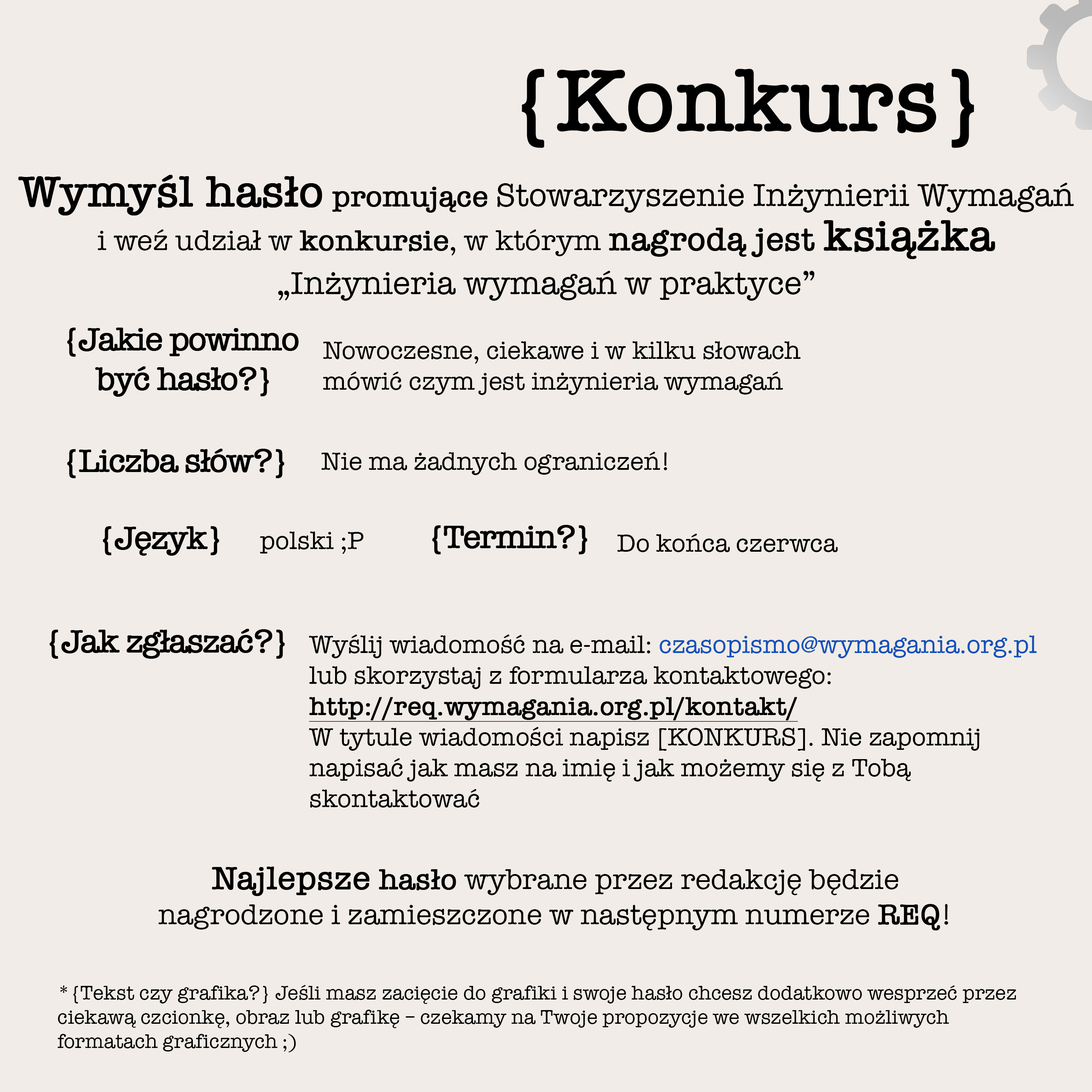
<style>
.page{position:relative;width:1092px;height:1092px;background:#f1ece7}
.page>*{position:absolute;margin:0}
.t1{font:88.1px "AmericanTypewriter";color:#000000;font-weight:bold}
.t2{font:33px/44px "AmericanTypewriter";color:#000000}
.t3{font:44px/44px "AmericanTypewriter";color:#000000;font-weight:bold}
.t4{font:29.4px/44px "AmericanTypewriter";color:#000000;font-weight:bold}
.t5{font:29.4px/44px "AmericanTypewriter";color:#000000}
.t6{font:33px/44px "AmericanTypewriter";color:#000000;font-weight:bold}
.t7{font:33px "AmericanTypewriter";letter-spacing:-0.05em;color:#000000;font-weight:bold}
.t8{font:25.7px "AmericanTypewriter";color:#000000}
.t9{font:25.7px "AmericanTypewriter";color:#1050ba}
.t10{font:25.7px "AmericanTypewriter";color:#000000;font-weight:bold;text-decoration:underline}
.t11{font:29.4px "AmericanTypewriter";color:#000000}
.t12{font:33px "AmericanTypewriter";color:#000000;font-weight:bold}
.t13{font:29.4px "AmericanTypewriter";color:#000000;font-weight:bold}
.t14{font:20.2px "AmericanTypewriter";color:#000000}
</style>
<div class="page">
<p class="t1" style="left:522px;top:69px;width:452px;height:79px">{Konkurs}</p>
<p class="t2" style="left:18px;top:175px;width:1056px;height:126px;text-align:center"><span class="t3">Wymyśl hasło</span><span class="t4"> promujące </span>Stowarzyszenie Inżynierii Wymagań<span class="t5"> i weź udział w </span><span class="t4">konkursie</span><span class="t5">, w którym </span><span class="t6">nagrodą jest </span><span class="t3">książka</span><span class="t5"> <br></span>„Inżynieria wymagań w praktyce”</p>
<p class="t7" style="left:67px;top:328px;width:232px;height:69px;text-align:center">{Jakie powinno <br>być hasło?}</p>
<p class="t8" style="left:323px;top:341px;width:478px;height:54px">Nowoczesne, ciekawe i w kilku słowach mówić czym jest inżynieria wymagań</p>
<p class="t7" style="left:67px;top:449px;width:217px;height:29px">{Liczba słów?}</p>
<p class="t8" style="left:321px;top:452px;width:346px;height:23px">Nie ma żadnych ograniczeń!</p>
<p class="t7" style="left:103px;top:526px;width:116px;height:30px">{Język}</p>
<p class="t8" style="left:260px;top:531px;width:104px;height:23px">polski ;P</p>
<p class="t7" style="left:432px;top:525px;width:155px;height:29px">{Termin?}</p>
<p class="t8" style="left:617px;top:534px;width:221px;height:18px">Do końca czerwca</p>
<p class="t7" style="left:49px;top:629px;width:236px;height:30px">{Jak zgłaszać?}</p>
<p class="t8" style="left:309px;top:634px;width:728px;height:174px">Wyślij wiadomość na e-mail: <span class="t9">czasopismo@wymagania.org.pl </span>lub skorzystaj z formularza kontaktowego: <span class="t10">http://req.wymagania.org.pl/kontakt/<br></span>W tytule wiadomości napisz [KONKURS]. Nie zapomnij napisać jak masz na imię i jak możemy się z Tobą skontaktować</p>
<p class="t11" style="left:159px;top:867px;width:789px;height:63px;text-align:center"><span class="t12">Najlepsze</span><span class="t13"> hasło</span> wybrane przez redakcję będzie nagrodzone i zamieszczone w następnym numerze <span class="t13">REQ</span>!</p>
<p class="t14" style="left:57px;top:985px;width:959px;height:67px">*{Tekst czy grafika?} Jeśli masz zacięcie do grafiki i swoje hasło chcesz dodatkowo wesprzeć przez ciekawą czcionkę, obraz lub grafikę – czekamy na Twoje propozycje we wszelkich możliwych formatach graficznych ;)</p>
</div>
